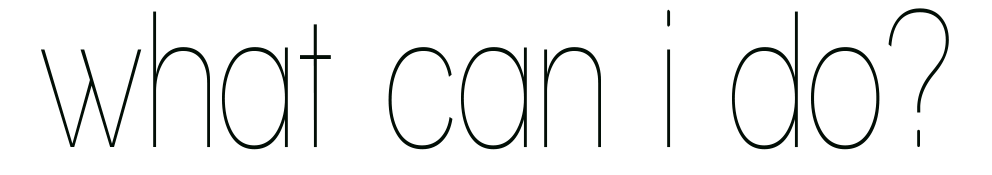
<style>
.page{position:relative;width:992px;height:175px;background:#ffffff}
.page>*{position:absolute;margin:0}
.t1{font:199.7px "WalkwayCondensed";color:#020e06}
</style>
<div class="page">
<p class="t1" style="left:41px;top:8px;width:908px;height:142px">what can i do?</p>
</div>
